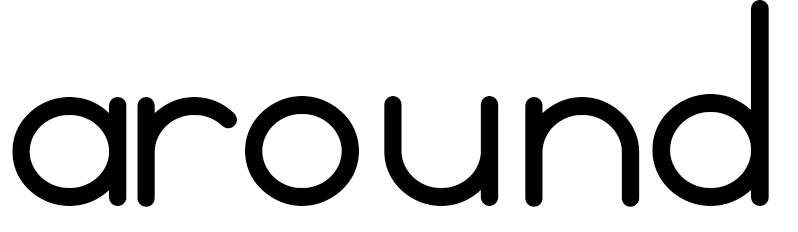
<style>
.page{position:relative;width:798px;height:232px;background:#ffffff}
.page>*{position:absolute;margin:0}
.t1{font:200px "Focus-Medium";color:#000000}
</style>
<div class="page">
<p class="t1" style="left:12px;top:0px;width:757px;height:207px">around</p>
</div>
